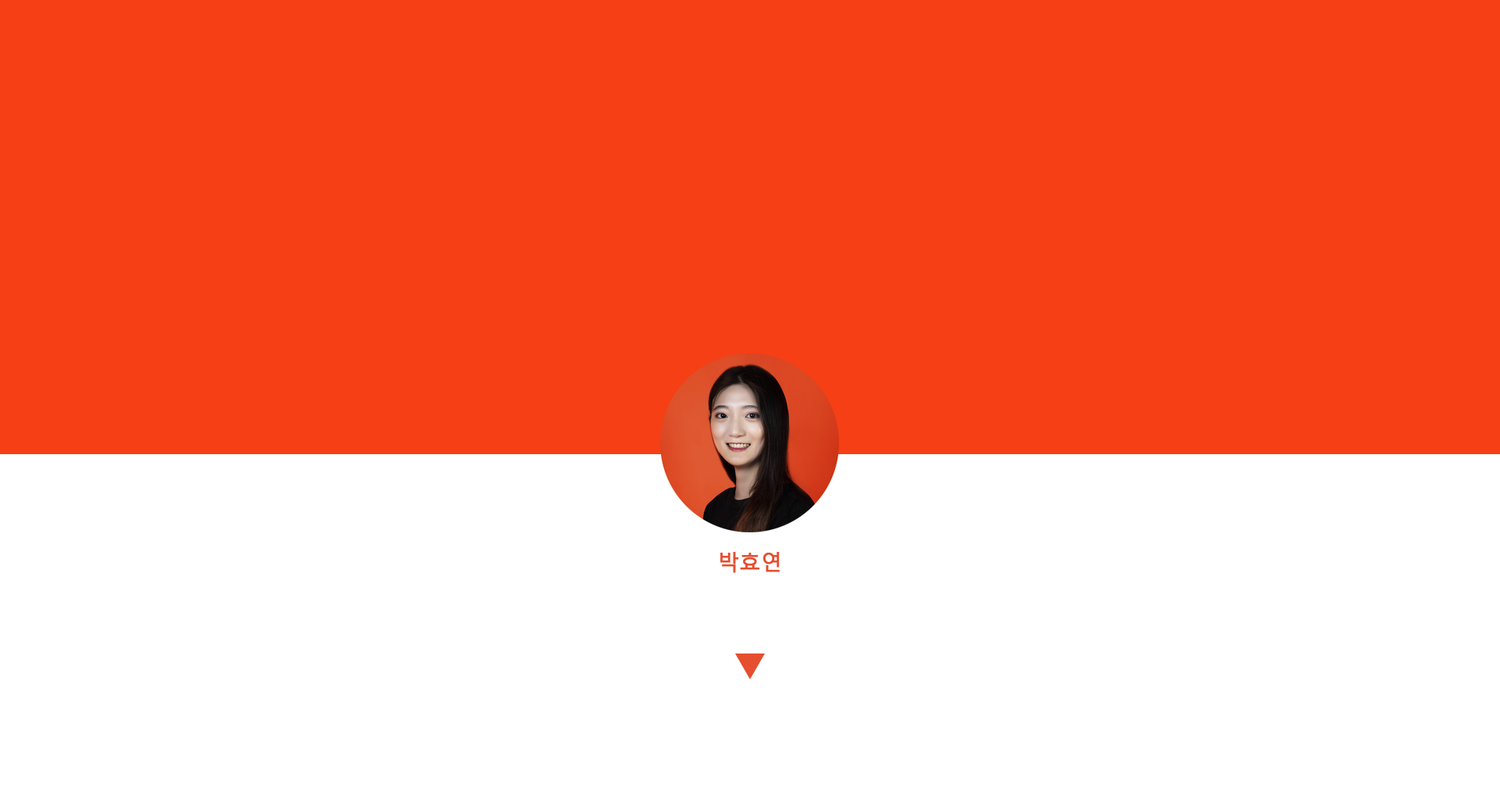
<style>
.page{position:relative;width:1500px;height:795px;background:#f63f14}
.page>*{position:absolute;margin:0}
.t1{font:20.8px "MalgunGothic";color:#e54e2f;font-weight:bold}
</style>
<div class="page">
<p class="t1" style="left:721px;top:552px;width:59px;height:21px">박효연</p>
</div>
